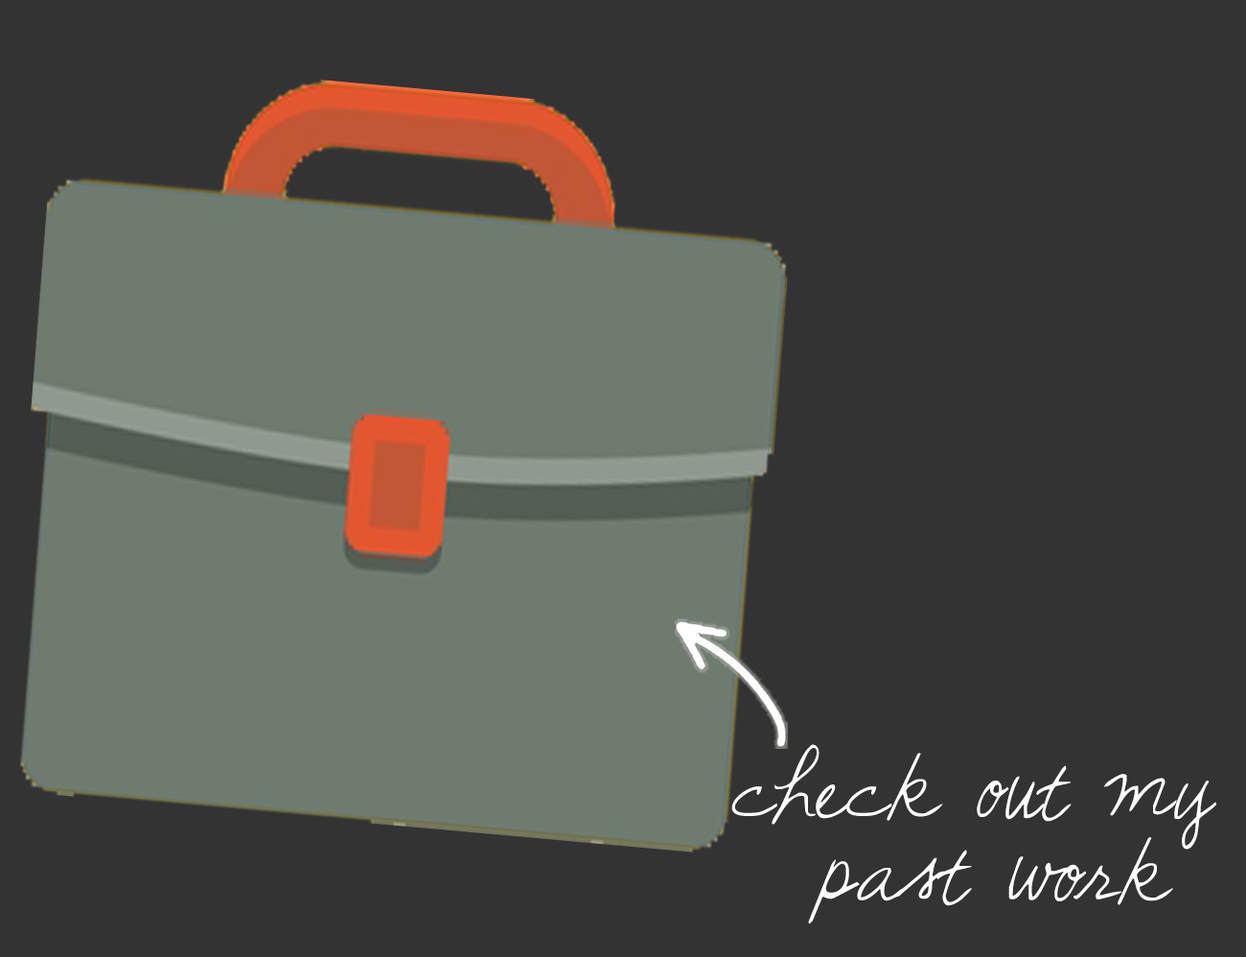
<style>
.page{position:relative;width:1246px;height:957px;background:#333333}
.page>*{position:absolute;margin:0}
.t1{font:70.1px "SunshineInMySoul";color:#fefefe;scale:0.95 1}
</style>
<div class="page">
<p class="t1" style="left:731px;top:744px;width:487px;height:180px;text-align:center">check out my <br>past work</p>
</div>
